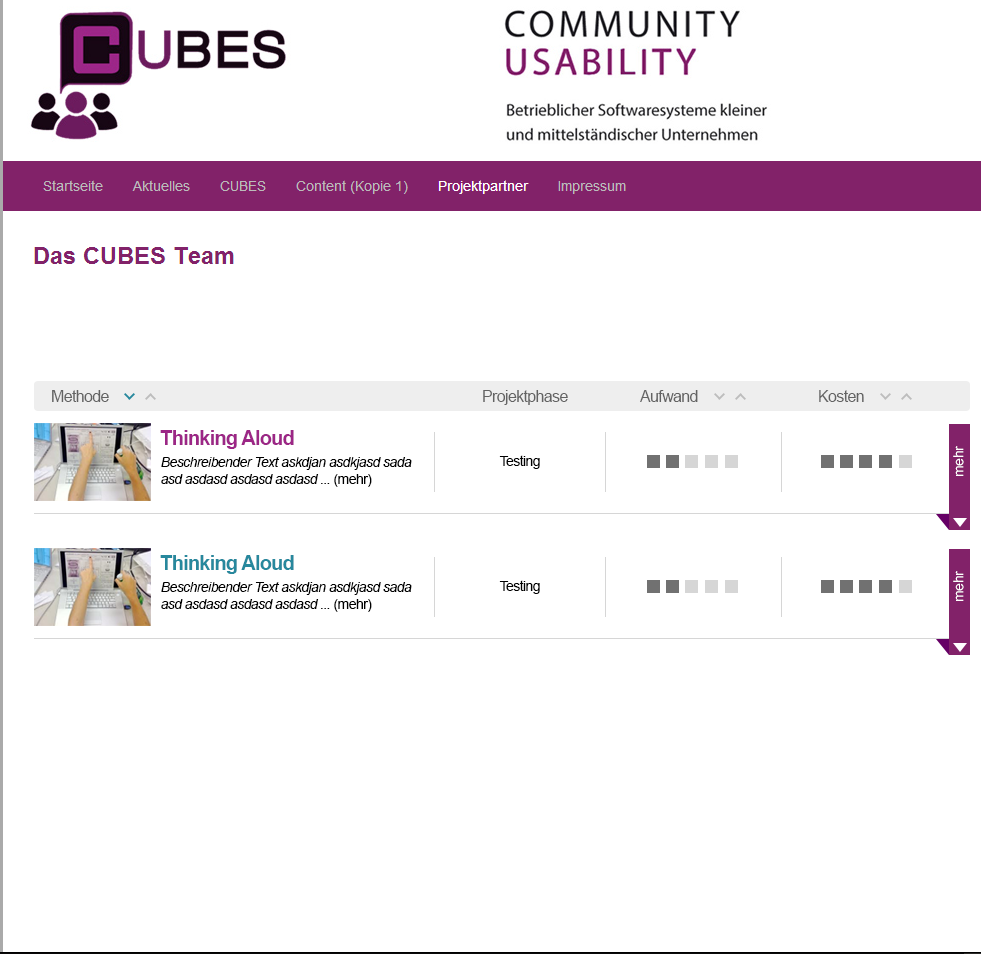
<style>
.page{position:relative;width:981px;height:954px;background:#ffffff}
.page>*{position:absolute;margin:0}
.t1{font:16px "ArialMT";letter-spacing:-0.04em;color:#636363}
.t2{font:20px "Arial-BoldMT";letter-spacing:-0.04em;color:#9c2686}
.t3{font:14px "ArialMT";letter-spacing:-0.04em;color:#ffffff}
.t4{font:14px "Arial-ItalicMT";letter-spacing:-0.04em;color:#000000}
.t5{font:14px "ArialMT";letter-spacing:-0.04em;color:#000000}
.t6{font:20px "Arial-BoldMT";letter-spacing:-0.04em;color:#27889d}
</style>
<div class="page">
<p class="t1" style="left:52px;top:390px;width:57px;height:12px">Methode</p>
<p class="t1" style="left:483px;top:390px;width:85px;height:15px">Projektphase</p>
<p class="t1" style="left:640px;top:390px;width:58px;height:12px">Aufwand</p>
<p class="t1" style="left:819px;top:390px;width:45px;height:12px">Kosten</p>
<p class="t2" style="left:160px;top:430px;width:134px;height:19px">Thinking Aloud</p>
<p class="t3" style="left:953px;top:446px;width:11px;height:30px;rotate:-90deg">mehr</p>
<p class="t4" style="left:161px;top:457px;width:251px;height:30px">Beschreibender Text askdjan asdkjasd sada<br>asd asdasd asdasd asdasd ... <span class="t5">(mehr)</span></p>
<p class="t5" style="left:499px;top:455px;width:41px;height:14px">Testing</p>
<p class="t6" style="left:160px;top:555px;width:134px;height:19px">Thinking Aloud</p>
<p class="t4" style="left:161px;top:582px;width:251px;height:30px">Beschreibender Text askdjan asdkjasd sada<br>asd asdasd asdasd asdasd ... <span class="t5">(mehr)</span></p>
<p class="t5" style="left:499px;top:580px;width:41px;height:14px">Testing</p>
<p class="t3" style="left:953px;top:571px;width:11px;height:30px;rotate:-90deg">mehr</p>
</div>
